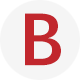
<style>
.page{position:relative;width:80px;height:80px;background:#f5f5f5}
.page>*{position:absolute;margin:0}
.t1{font:75px "DengXian-Bold";color:#c1272d}
</style>
<div class="page">
<p class="t1" style="left:25px;top:13px;width:36px;height:53px">B</p>
</div>
